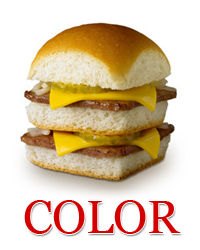
<style>
.page{position:relative;width:200px;height:250px;background:#ffffff}
.page>*{position:absolute;margin:0}
.t1{font:45.6px "Georgia";color:#d40000}
</style>
<div class="page">
<p class="t1" style="left:24px;top:200px;width:157px;height:34px">COLOR</p>
</div>
